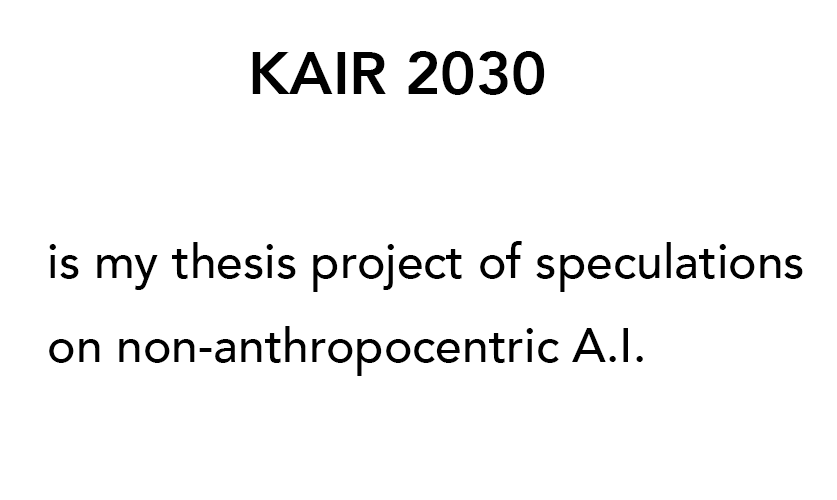
<style>
.page{position:relative;width:837px;height:500px;background:#ffffff}
.page>*{position:absolute;margin:0}
.t1{font:60px "Avenir-Heavy";color:#000000}
.t2{font:48px/84px "Avenir-Medium";color:#000000}
</style>
<div class="page">
<p class="t1" style="left:252px;top:51px;width:293px;height:44px">KAIR 2030</p>
<p class="t2" style="left:49px;top:241px;width:754px;height:135px">is my thesis project of speculations<br>on non-anthropocentric A.I.</p>
</div>
